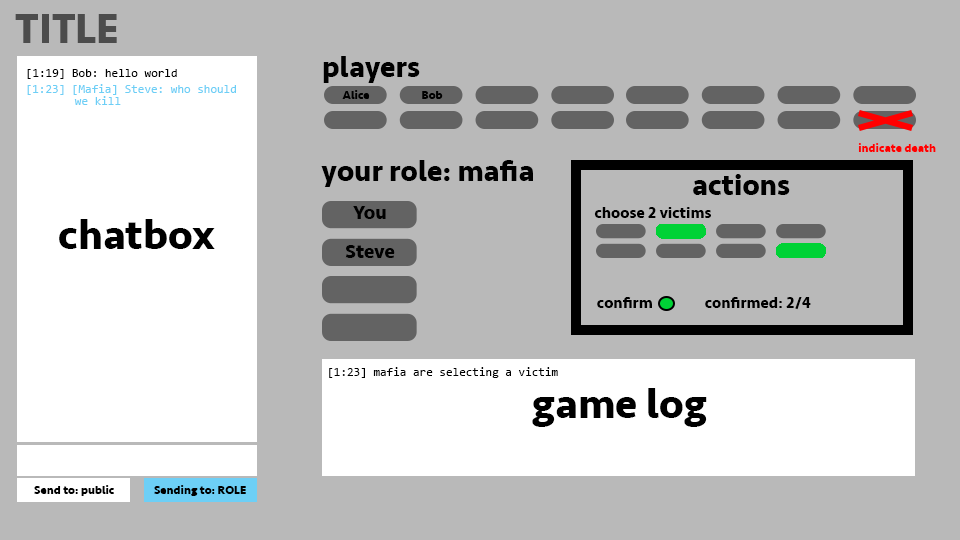
<style>
.page{position:relative;width:960px;height:540px;background:#b9b9b9}
.page>*{position:absolute;margin:0}
.t1{font:42.7px "Seravek-Bold";color:#4c4c4c}
.t2{font:30px "Seravek-Bold";color:#000000}
.t3{font:12px "Consolas";color:#000000}
.t4{font:12px/12px "Consolas";color:#6dcff6}
.t5{font:12px "Seravek-Bold";color:#000000}
.t6{font:12px "Seravek-Bold";color:#ff0000}
.t7{font:20px "Seravek-Bold";color:#000000}
.t8{font:16px "Seravek-Bold";color:#000000}
.t9{font:42.7px "Seravek-Bold";color:#000000}
</style>
<div class="page">
<p class="t1" style="left:15px;top:14px;width:102px;height:29px">TITLE</p>
<p class="t2" style="left:323px;top:56px;width:97px;height:27px">players</p>
<p class="t3" style="left:27px;top:69px;width:150px;height:10px">[1:19] Bob: hello world</p>
<p class="t4" style="left:27px;top:84px;width:209px;height:21px">[1:23] [Mafia] Steve: who should<br>   we kill</p>
<p class="t5" style="left:342px;top:90px;width:28px;height:9px">Alice</p>
<p class="t5" style="left:422px;top:91px;width:21px;height:8px">Bob</p>
<p class="t6" style="left:858px;top:143px;width:78px;height:9px">indicate death</p>
<p class="t2" style="left:321px;top:160px;width:212px;height:27px">your role: mafia</p>
<p class="t2" style="left:693px;top:174px;width:97px;height:21px">actions</p>
<p class="t7" style="left:353px;top:206px;width:33px;height:13px">You</p>
<p class="t8" style="left:594px;top:207px;width:117px;height:11px">choose 2 victims</p>
<p class="t9" style="left:59px;top:219px;width:156px;height:30px">chatbox</p>
<p class="t7" style="left:345px;top:245px;width:50px;height:13px">Steve</p>
<p class="t8" style="left:597px;top:297px;width:55px;height:11px">confirm</p>
<p class="t8" style="left:705px;top:297px;width:106px;height:13px">confirmed: 2/4</p>
<p class="t3" style="left:329px;top:367px;width:229px;height:11px">[1:23] mafia are selecting a victim</p>
<p class="t9" style="left:532px;top:388px;width:175px;height:39px">game log</p>
<p class="t5" style="left:34px;top:485px;width:80px;height:11px">Send to: public</p>
<p class="t5" style="left:154px;top:485px;width:92px;height:11px">Sending to: ROLE</p>
</div>
